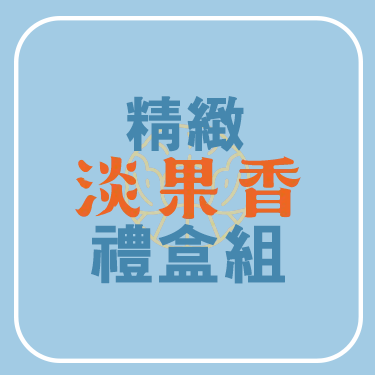
<style>
.page{position:relative;width:375px;height:375px;background:#a2cbe4}
.page>*{position:absolute;margin:0}
.t1{font:60px "AdobeGothicStd-Bold";color:#4587ae;text-transform:uppercase;font-weight:bold}
.t2{font:65px "AdobeGothicStd-Bold";color:#4587ae;text-transform:uppercase;font-weight:bold}
</style>
<div class="page">
<p class="t1" style="left:126px;top:96px;width:118px;height:56px">精緻</p>
<p class="t2" style="left:91px;top:224px;width:194px;height:60px">禮盒組</p>
</div>
